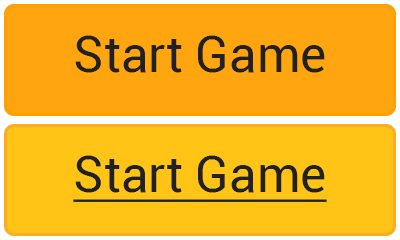
<style>
.page{position:relative;width:400px;height:240px;background:#fea50f}
.page>*{position:absolute;margin:0}
.t1{font:12px "Roboto-Regular";color:#212121}
.t2{font:12px "Roboto-Regular";color:#212121;text-decoration:underline}
</style>
<div class="page">
<p class="t1" style="left:75px;top:35px;width:250px;height:38px;text-align:center">Start Game</p>
<p class="t2" style="left:73px;top:155px;width:254px;height:47px;text-align:center">Start Game</p>
</div>
